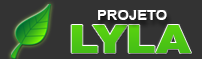
<style>
.page{position:relative;width:202px;height:59px;background:#333333}
.page>*{position:absolute;margin:0}
.t1{font:14.4px "ArialNarrow-Bold";color:#ffffff;text-transform:uppercase;scale:1.25 1}
.t2{font:38.4px "HelveticaNeueLTPro-Blk";color:#4dc513;text-transform:uppercase;scale:1.25 1}
</style>
<div class="page">
<p class="t1" style="left:98px;top:10px;width:69px;height:10px">Projeto</p>
<p class="t2" style="left:71px;top:25px;width:120px;height:28px">lylA</p>
</div>
